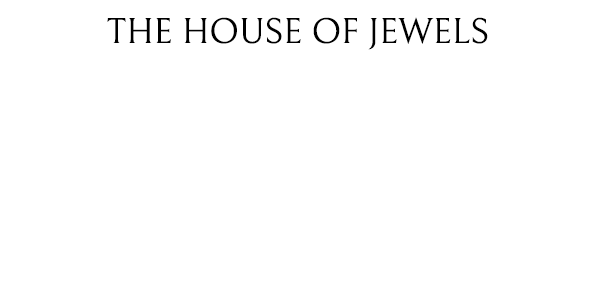
<style>
.page{position:relative;width:600px;height:300px;background:#ffffff}
.page>*{position:absolute;margin:0}
.t1{font:36px "Bellefair-Regular";color:#000000}
</style>
<div class="page">
<p class="t1" style="left:107px;top:17px;width:381px;height:33px">THE HOUSE OF JEWELS</p>
</div>
